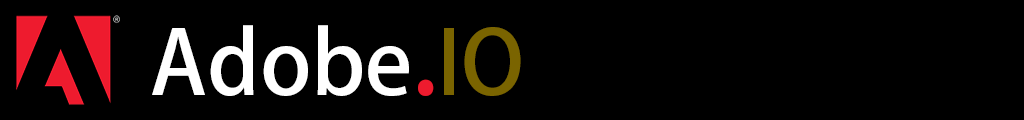
<style>
.page{position:relative;width:1024px;height:120px;background:#000000}
.page>*{position:absolute;margin:0}
.t1{font:87px "AdobeFanHeitiStd-Bold";color:#ffffff}
.t2{font:102.8px "AdobeFanHeitiStd-Bold";color:#ee1b2e}
.t3{font:87px "AdobeFanHeitiStd-Bold";color:#7a6400}
</style>
<div class="page">
<p class="t1" style="left:152px;top:25px;width:369px;height:71px">Adobe<span class="t2">.</span><span class="t3">IO</span></p>
</div>
